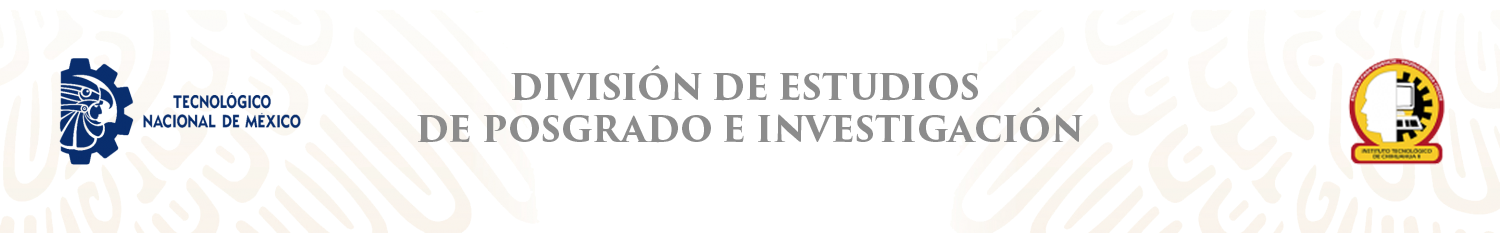
<style>
.page{position:relative;width:1500px;height:233px;background:#ffffff}
.page>*{position:absolute;margin:0}
.t1{font:34.7px "TrajanPro3-Bold";color:#8c8c8c}
</style>
<div class="page">
<p class="t1" style="left:417px;top:65px;width:666px;height:78px;text-align:center">DIVISIÓN DE ESTUDIOS <br>DE POSGRADO E INVESTIGACIÓN</p>
</div>
